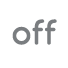
<style>
.page{position:relative;width:68px;height:68px;background:#ffffff}
.page>*{position:absolute;margin:0}
.t1{font:32.1px "Comfortaa-Bold";color:#7a7d80}
</style>
<div class="page">
<p class="t1" style="left:12px;top:19px;width:45px;height:26px">off</p>
</div>
